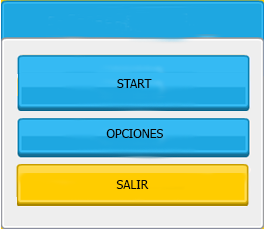
<style>
.page{position:relative;width:264px;height:229px;background:#eeeeee}
.page>*{position:absolute;margin:0}
.t1{font:12px "Tahoma";color:#050505}
</style>
<div class="page">
<p class="t1" style="left:117px;top:79px;width:35px;height:9px">START</p>
<p class="t1" style="left:106px;top:129px;width:57px;height:9px">OPCIONES</p>
<p class="t1" style="left:116px;top:180px;width:33px;height:9px">SALIR</p>
</div>
